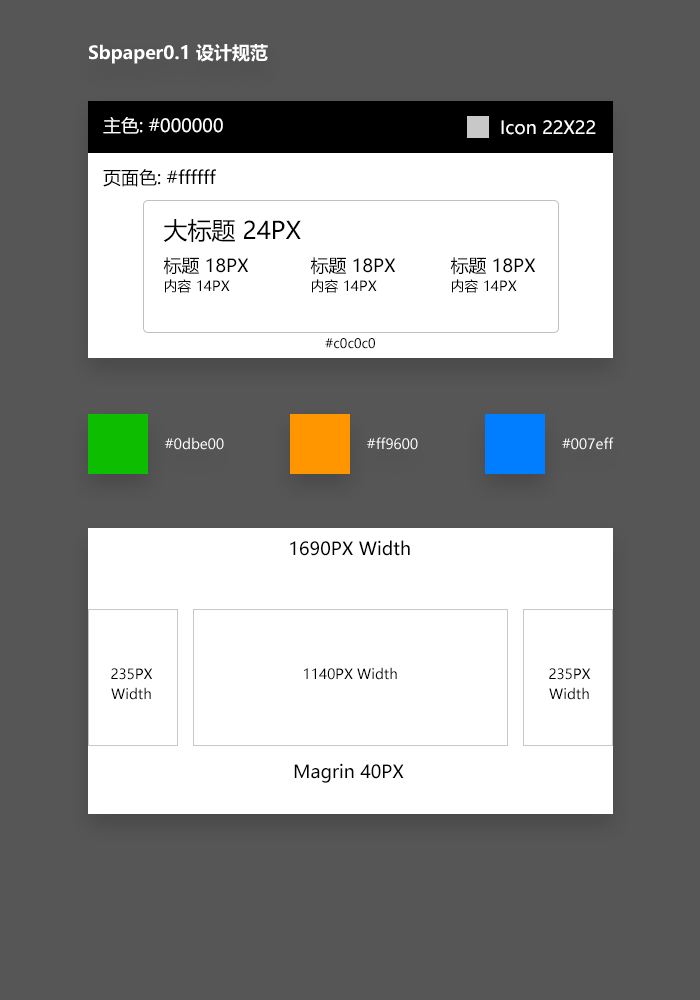
<style>
.page{position:relative;width:700px;height:1000px;background:#565656}
.page>*{position:absolute;margin:0}
.t1{font:18px "MicrosoftYaHeiUI-Bold";color:#ffffff}
.t2{font:18px "MicrosoftYaHeiUI";color:#ffffff}
.t3{font:18px "MicrosoftYaHeiUI";color:#000000}
.t4{font:24px "MicrosoftYaHeiUI";color:#000000}
.t5{font:14px "MicrosoftYaHeiUI";color:#000000}
.t6{font:13px "MicrosoftYaHeiUI";color:#000000}
.t7{font:14px "MicrosoftYaHeiUI";color:#ffffff}
.t8{font:14px/20px "MicrosoftYaHeiUI";color:#000000}
</style>
<div class="page">
<p class="t1" style="left:89px;top:44px;width:179px;height:20px">Sbpaper0.1 设计规范</p>
<p class="t2" style="left:103px;top:117px;width:120px;height:17px">主色: #000000</p>
<p class="t2" style="left:501px;top:120px;width:95px;height:15px">Icon 22X22</p>
<p class="t3" style="left:103px;top:169px;width:113px;height:18px">页面色: #ffffff</p>
<p class="t4" style="left:163px;top:219px;width:138px;height:23px">大标题 24PX</p>
<p class="t3" style="left:163px;top:257px;width:86px;height:18px">标题 18PX</p>
<p class="t3" style="left:310px;top:257px;width:86px;height:18px">标题 18PX</p>
<p class="t3" style="left:450px;top:257px;width:86px;height:18px">标题 18PX</p>
<p class="t5" style="left:165px;top:279px;width:65px;height:14px">内容 14PX</p>
<p class="t5" style="left:312px;top:279px;width:65px;height:14px">内容 14PX</p>
<p class="t5" style="left:452px;top:279px;width:65px;height:14px">内容 14PX</p>
<p class="t6" style="left:325px;top:338px;width:50px;height:11px">#c0c0c0</p>
<p class="t7" style="left:165px;top:437px;width:59px;height:13px">#0dbe00</p>
<p class="t7" style="left:367px;top:437px;width:51px;height:13px">#ff9600</p>
<p class="t7" style="left:562px;top:437px;width:52px;height:13px">#007eff</p>
<p class="t3" style="left:290px;top:540px;width:120px;height:16px">1690PX Width</p>
<p class="t8" style="left:111px;top:668px;width:42px;height:32px;text-align:center">235PX<br>Width</p>
<p class="t5" style="left:304px;top:667px;width:93px;height:13px">1140PX Width</p>
<p class="t8" style="left:549px;top:668px;width:42px;height:32px;text-align:center">235PX<br>Width</p>
<p class="t3" style="left:294px;top:763px;width:110px;height:20px">Magrin 40PX</p>
</div>
